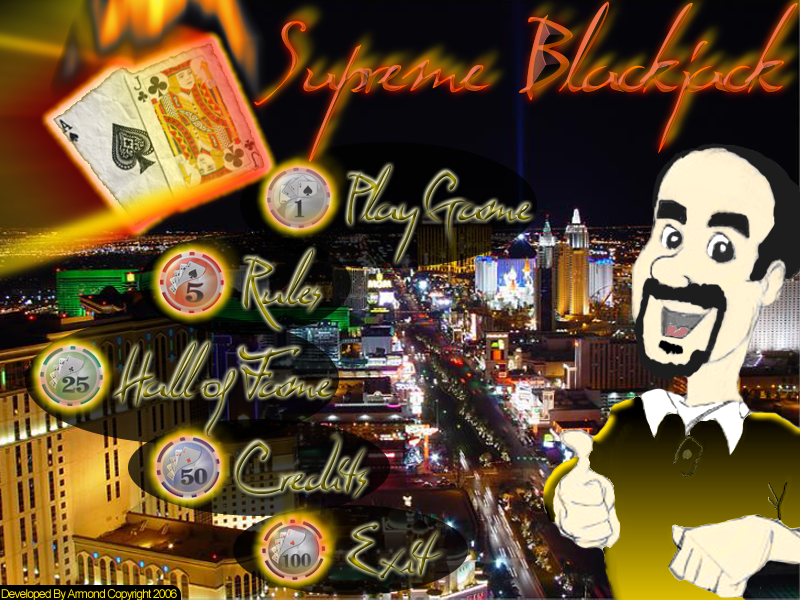
<style>
.page{position:relative;width:800px;height:600px}
.page>*{position:absolute;margin:0}
.t1{font:55.3px/1179.6px "Dali";letter-spacing:-0.075em}
.t2{font:55.3px "Dali";letter-spacing:-0.075em}
.t3{font:12px "Copyright Cyr Bold";letter-spacing:-0.075em;color:#ffe400}
</style>
<div class="page">
<p class="t1" style="left:348px;top:165px;width:186px;height:99px;text-align:center">Play Game</p>
<p class="t1" style="left:348px;top:165px;width:186px;height:99px;text-align:center">Play Game</p>
<p class="t2" style="left:244px;top:249px;width:77px;height:81px">Rules</p>
<p class="t2" style="left:244px;top:249px;width:77px;height:81px">Rules</p>
<p class="t1" style="left:113px;top:342px;width:221px;height:95px;text-align:center">Hall of Fame</p>
<p class="t1" style="left:113px;top:342px;width:221px;height:95px;text-align:center">Hall of Fame</p>
<p class="t2" style="left:348px;top:523px;width:95px;height:56px">Exit</p>
<p class="t2" style="left:348px;top:523px;width:95px;height:56px">Exit</p>
<p class="t3" style="left:1px;top:589px;width:176px;height:12px">Developed By Armond Copyright 2006</p>
</div>
